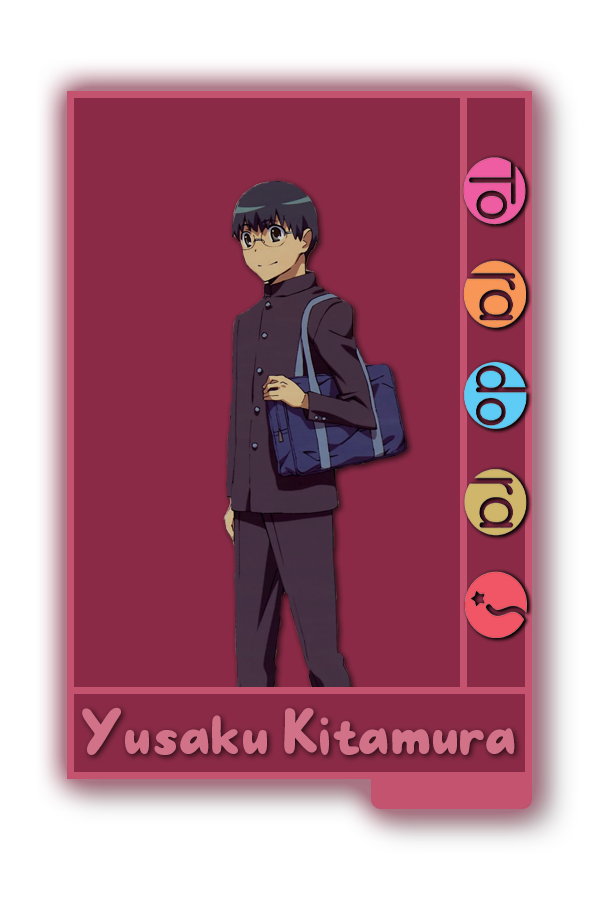
<style>
.page{position:relative;width:600px;height:900px;background:#8a2a46}
.page>*{position:absolute;margin:0}
.t1{font:66.1px "Go-Mocha";color:#d17289}
</style>
<div class="page">
<p class="t1" style="left:82px;top:707px;width:433px;height:48px">Yusaku Kitamura</p>
</div>
